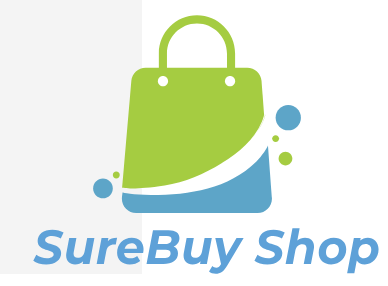
<style>
.page{position:relative;width:388px;height:286px;background:#ffffff}
.page>*{position:absolute;margin:0}
.t1{font:48.2px "Montserrat-BoldItalic";letter-spacing:0.01em;color:#5ea1d8;scale:0.96 1}
</style>
<div class="page">
<p class="t1" style="left:33px;top:228px;width:346px;height:46px">SureBuy Shop</p>
</div>
